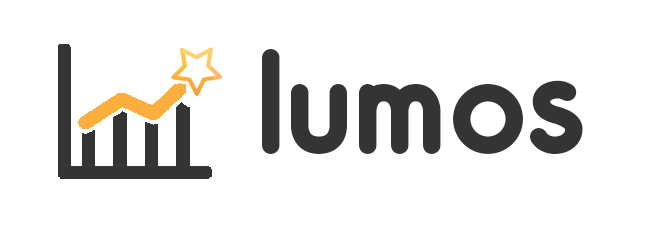
<style>
.page{position:relative;width:658px;height:225px;background:#ffffff}
.page>*{position:absolute;margin:0}
.t1{font:150px "Odin-Bold";color:#343434}
</style>
<div class="page">
<p class="t1" style="left:262px;top:49px;width:321px;height:105px">lumos</p>
</div>
